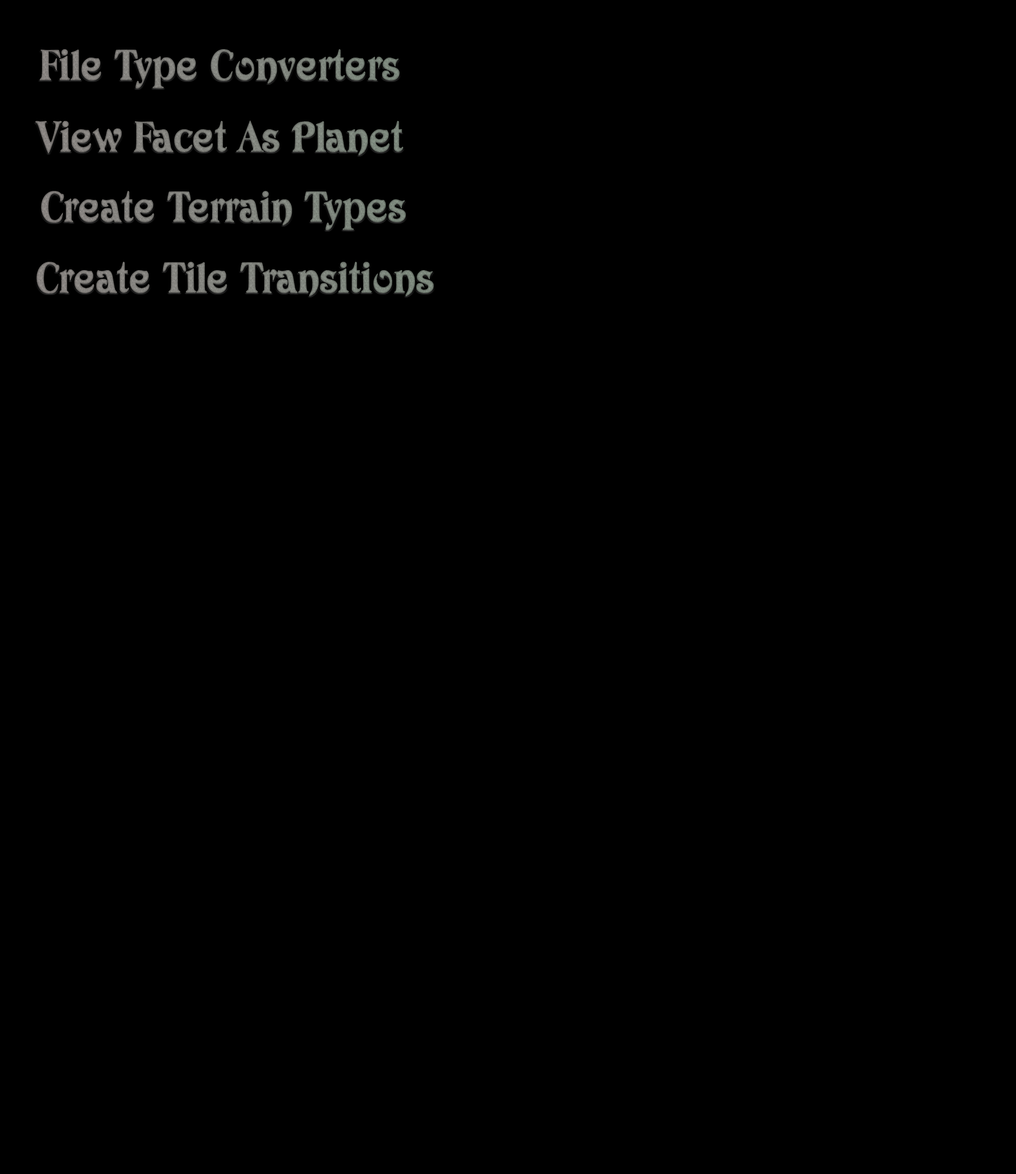
<style>
.page{position:relative;width:1016px;height:1174px;background:#000000}
.page>*{position:absolute;margin:0}
.t1{font:42.1px "Avatar";color:#7c7f79}
.t2{font:42.1px "Avatar";color:#7c8079}
</style>
<div class="page">
<p class="t1" style="left:40px;top:49px;width:360px;height:39px">File Type Converters</p>
<p class="t2" style="left:35px;top:120px;width:368px;height:35px">View Facet As Planet</p>
<p class="t2" style="left:41px;top:191px;width:365px;height:39px">Create Terrain Types</p>
<p class="t2" style="left:36px;top:262px;width:398px;height:34px">Create Tile Transitions</p>
</div>
